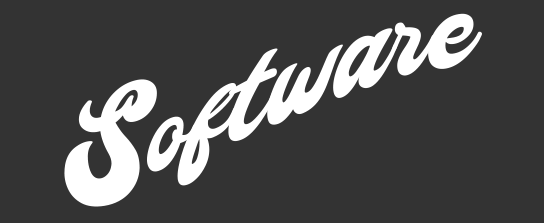
<style>
.page{position:relative;width:544px;height:223px;background:#333333}
.page>*{position:absolute;margin:0}
.t1{font:143px "SlothdownBaby";color:#ffffff}
</style>
<div class="page">
<p class="t1" style="left:64px;top:13px;width:418px;height:194px">Software</p>
</div>
